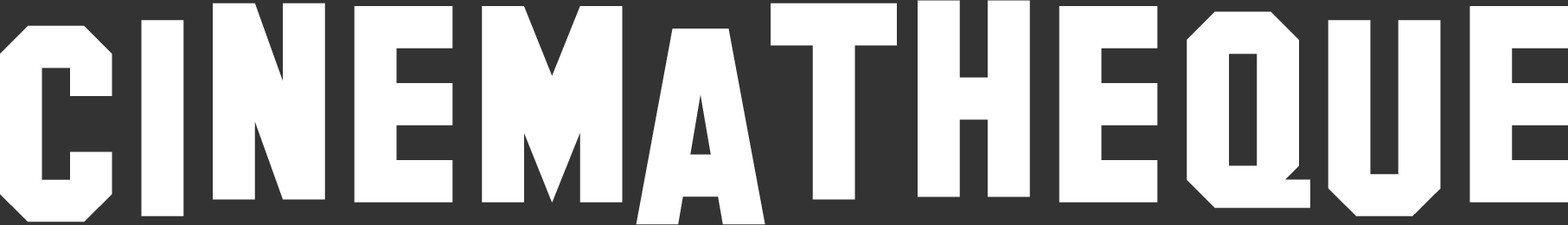
<style>
.page{position:relative;width:1568px;height:225px;background:#ffffff}
.page>*{position:absolute;margin:0}
.t1{font:279.8px "SFHollywoodHills";letter-spacing:0.025em;color:#ffffff}
</style>
<div class="page">
<p class="t1" style="left:0px;top:0px;width:1568px;height:225px">Cinematheque</p>
</div>
